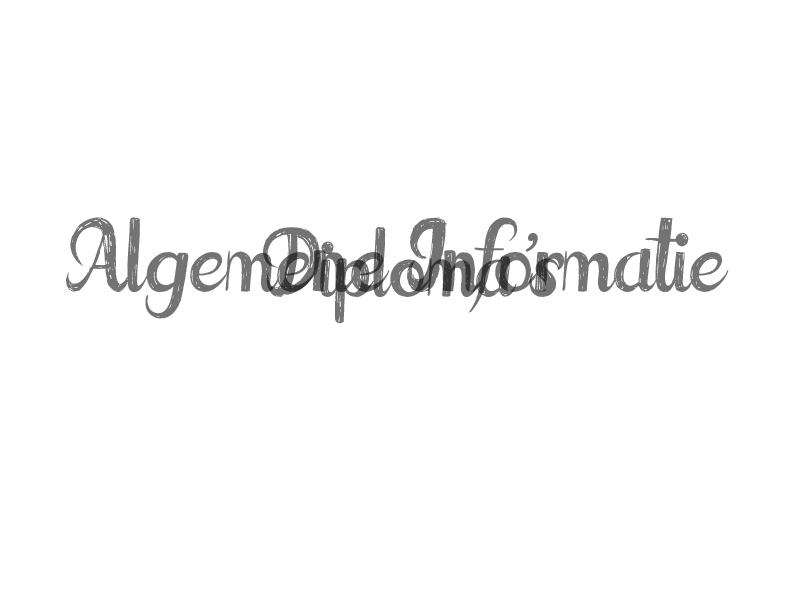
<style>
.page{position:relative;width:800px;height:600px;background:#ffffff}
.page>*{position:absolute;margin:0}
.t1{font:80px "FatTats";color:#737373}
.t2{font:75px "FatTats"}
.t3{font:75px "EuphemiaUCAS-Italic"}
</style>
<div class="page">
<p class="t1" style="left:66px;top:217px;width:663px;height:102px">Algemene Informatie</p>
<p class="t2" style="left:263px;top:227px;width:297px;height:97px">Diploma<span class="t3">’</span>s</p>
</div>
